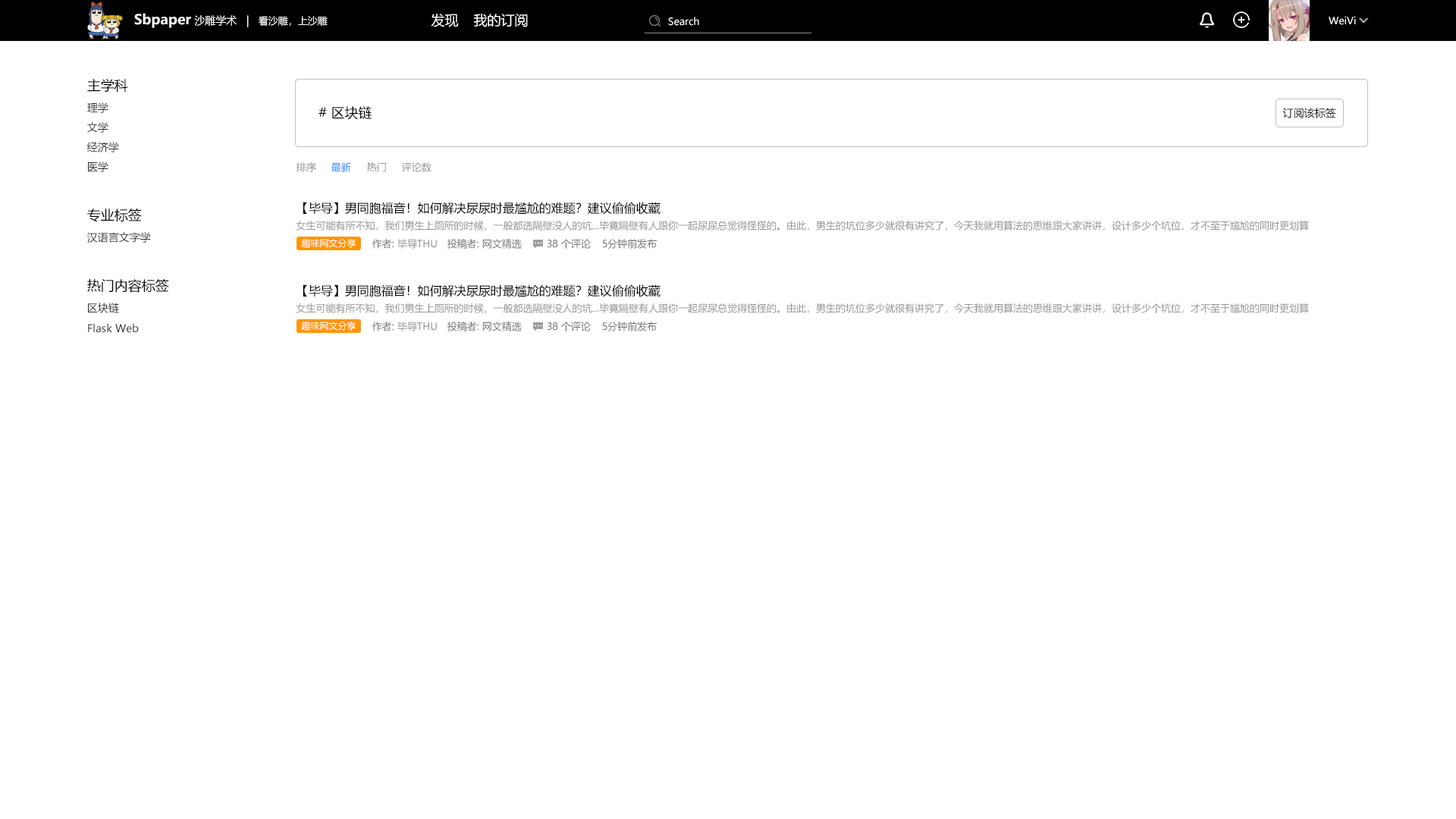
<style>
.page{position:relative;width:1456px;height:819px;background:#ffffff}
.page>*{position:absolute;margin:0}
.t1{font:10.6px "MicrosoftYaHeiUI";color:#ffffff}
.t2{font:13.6px "MicrosoftYaHeiUI-Bold";color:#ffffff}
.t3{font:9.9px "MicrosoftYaHeiUI";color:#ffffff}
.t4{font:13.6px "MicrosoftYaHeiUI";color:#ffffff}
.t5{font:13.6px "MicrosoftYaHeiUI";color:#000000}
.t6{font:10.6px "MicrosoftYaHeiUI";color:#303030}
.t7{font:10.6px "MicrosoftYaHeiUI";color:#000000}
.t8{font:9.9px "MicrosoftYaHeiUI";color:#939393}
.t9{font:9.9px "MicrosoftYaHeiUI";color:#007eff}
.t10{font:12.1px "MicrosoftYaHeiUI";color:#000000}
.t11{font:9.1px "MicrosoftYaHeiUI";color:#ffffff}
.t12{font:9.9px "MicrosoftYaHeiUI";color:#6f6f6f}
</style>
<div class="page">
<p class="t1" style="left:134px;top:13px;width:194px;height:15px"><span class="t2">Sbpaper </span>沙雕学术   |   <span class="t3">看沙雕，上沙雕</span></p>
<p class="t4" style="left:431px;top:14px;width:28px;height:13px">发现</p>
<p class="t4" style="left:473px;top:14px;width:55px;height:13px">我的订阅</p>
<p class="t3" style="left:668px;top:17px;width:31px;height:9px">Search</p>
<p class="t3" style="left:1329px;top:16px;width:27px;height:9px">WeiVi</p>
<p class="t5" style="left:87px;top:79px;width:41px;height:14px">主学科</p>
<p class="t6" style="left:87px;top:102px;width:21px;height:11px">理学</p>
<p class="t5" style="left:318px;top:106px;width:54px;height:14px"># 区块链</p>
<p class="t7" style="left:1282px;top:108px;width:54px;height:10px">订阅该标签</p>
<p class="t6" style="left:87px;top:122px;width:21px;height:11px">文学</p>
<p class="t6" style="left:87px;top:142px;width:32px;height:10px">经济学</p>
<p class="t6" style="left:88px;top:162px;width:20px;height:10px">医学</p>
<p class="t8" style="left:297px;top:162px;width:19px;height:10px">排序</p>
<p class="t9" style="left:331px;top:162px;width:20px;height:10px">最新</p>
<p class="t8" style="left:367px;top:162px;width:19px;height:10px">热门</p>
<p class="t8" style="left:402px;top:162px;width:29px;height:10px">评论数</p>
<p class="t5" style="left:87px;top:209px;width:55px;height:13px">专业标签</p>
<p class="t10" style="left:303px;top:202px;width:357px;height:13px">【毕导】男同胞福音！如何解决尿尿时最尴尬的难题？建议偷偷收藏</p>
<p class="t8" style="left:296px;top:221px;width:1013px;height:10px">女生可能有所不知，我们男生上厕所的时候，一般都选隔壁没人的坑...毕竟隔壁有人跟你一起尿尿总觉得怪怪的。由此，男生的坑位多少就很有讲究了，今天我就用算法的思维跟大家讲讲，设计多少个坑位，才不至于尴尬的同时更划算</p>
<p class="t6" style="left:87px;top:232px;width:64px;height:11px">汉语言文字学</p>
<p class="t11" style="left:301px;top:238px;width:55px;height:10px">趣味网文分享</p>
<p class="t8" style="left:372px;top:239px;width:65px;height:10px"><span class="t12">作者: </span>毕导THU</p>
<p class="t12" style="left:447px;top:239px;width:75px;height:10px">投稿者: 网文精选</p>
<p class="t12" style="left:547px;top:239px;width:44px;height:10px">38 个评论</p>
<p class="t12" style="left:602px;top:239px;width:55px;height:10px">5分钟前发布</p>
<p class="t5" style="left:87px;top:278px;width:82px;height:15px">热门内容标签</p>
<p class="t10" style="left:303px;top:284px;width:357px;height:13px">【毕导】男同胞福音！如何解决尿尿时最尴尬的难题？建议偷偷收藏</p>
<p class="t6" style="left:88px;top:303px;width:31px;height:10px">区块链</p>
<p class="t8" style="left:296px;top:303px;width:1013px;height:10px">女生可能有所不知，我们男生上厕所的时候，一般都选隔壁没人的坑...毕竟隔壁有人跟你一起尿尿总觉得怪怪的。由此，男生的坑位多少就很有讲究了，今天我就用算法的思维跟大家讲讲，设计多少个坑位，才不至于尴尬的同时更划算</p>
<p class="t6" style="left:88px;top:323px;width:51px;height:10px">Flask Web</p>
<p class="t11" style="left:301px;top:321px;width:55px;height:10px">趣味网文分享</p>
<p class="t8" style="left:372px;top:322px;width:65px;height:9px"><span class="t12">作者: </span>毕导THU</p>
<p class="t12" style="left:447px;top:322px;width:75px;height:9px">投稿者: 网文精选</p>
<p class="t12" style="left:547px;top:322px;width:44px;height:9px">38 个评论</p>
<p class="t12" style="left:602px;top:322px;width:55px;height:9px">5分钟前发布</p>
</div>
